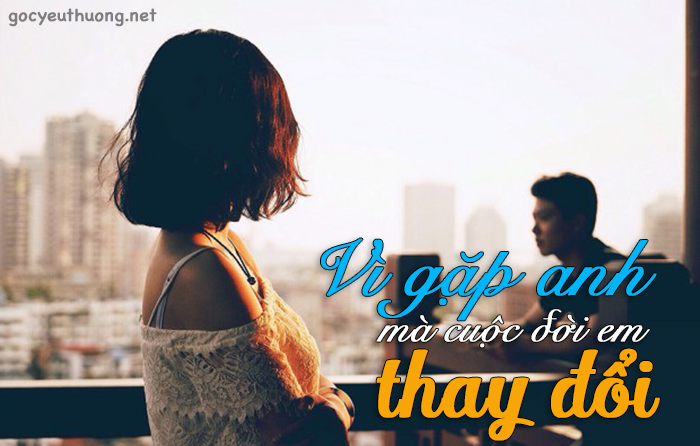
<style>
.page{position:relative;width:700px;height:446px}
.page>*{position:absolute;margin:0}
.t1{font:18px "ChalkboardSE-Regular";color:#807e80;font-weight:bold}
.t2{font:78px "SnellRoundhand";color:#00b5f8;font-weight:bold}
.t3{font:44.8px "SnellRoundhand";color:#ffffff;font-weight:bold}
.t4{font:93.2px "SVN-ShintiaScript";color:#f8a607;font-weight:bold}
</style>
<div class="page">
<p class="t1" style="left:8px;top:8px;width:149px;height:19px">gocyeuthuong.net</p>
<p class="t2" style="left:321px;top:238px;width:336px;height:83px">Vì gặp anh</p>
<p class="t3" style="left:376px;top:309px;width:203px;height:39px">mà cuộc đờ</p>
<p class="t3" style="left:572px;top:317px;width:78px;height:25px">i em</p>
<p class="t4" style="left:376px;top:348px;width:284px;height:93px">thay đổi</p>
</div>
